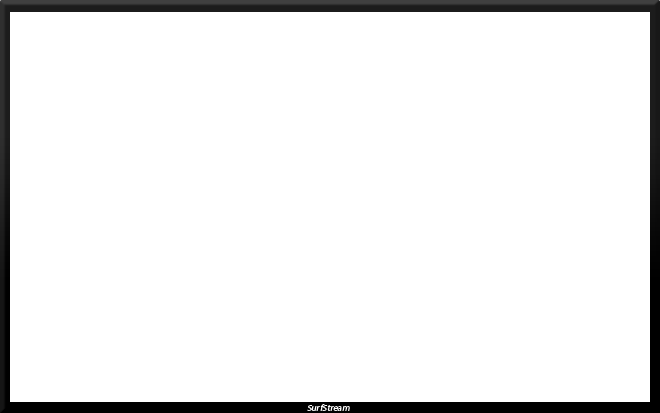
<style>
.page{position:relative;width:660px;height:413px;background:#ffffff}
.page>*{position:absolute;margin:0}
.t1{font:8.8px "MyriadPro-Regular";color:#ffffff;font-style:italic;scale:1.05 1}
</style>
<div class="page">
<p class="t1" style="left:307px;top:404px;width:43px;height:7px">SurfStream</p>
</div>
